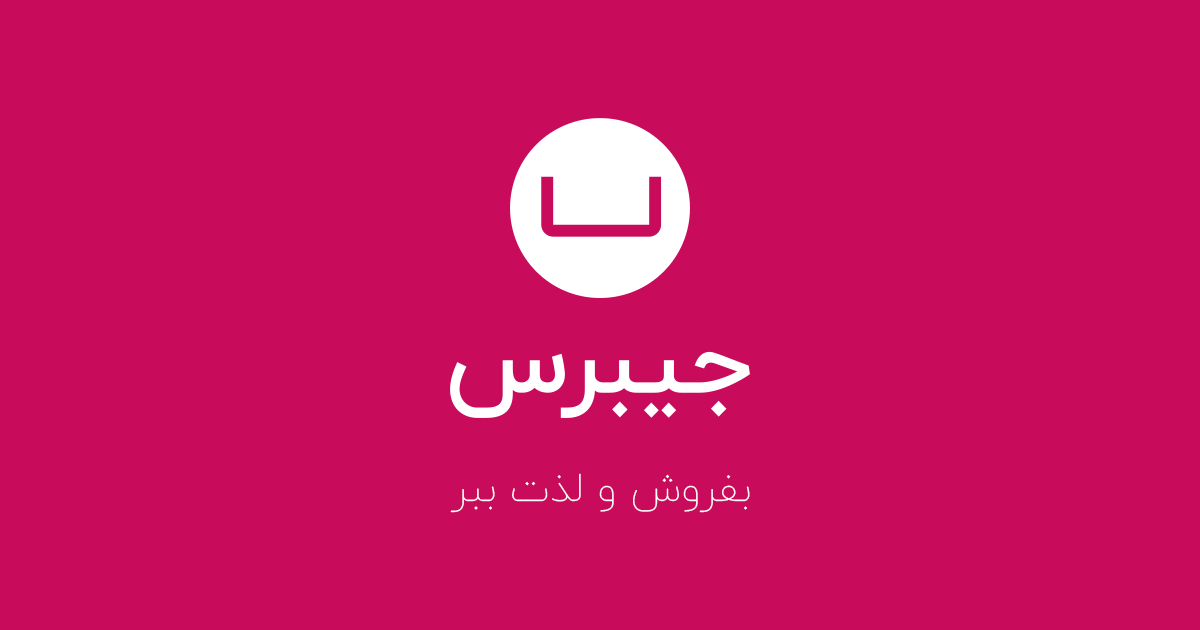
<style>
.page{position:relative;width:1200px;height:630px;background:#c80b5b}
.page>*{position:absolute;margin:0}
.t1{font:41.5px "IRANYekan-Thin";color:#ffffff}
</style>
<div class="page">
<p class="t1" style="left:450px;top:473px;width:300px;height:40px">بفروش و لذت ببر</p>
</div>
